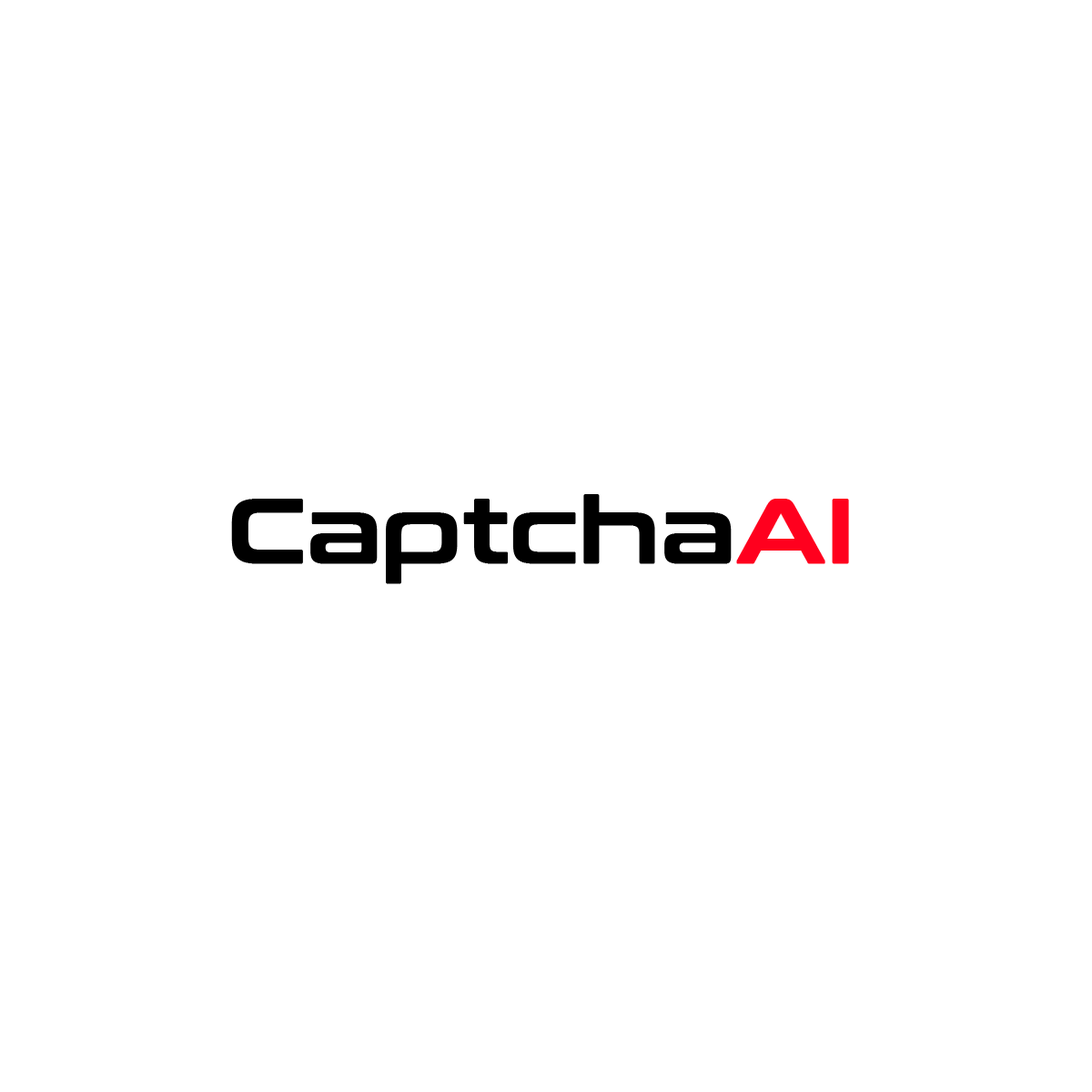
<style>
.page{position:relative;width:1092px;height:1092px;background:#ffffff}
.page>*{position:absolute;margin:0}
.t1{font:91px "ConthraxSb-Regular";color:#000000;font-weight:bold}
.t2{font:91px "ConthraxSb-Regular";color:#ff001e;font-weight:bold}
</style>
<div class="page">
<p class="t1" style="left:231px;top:494px;width:618px;height:90px">Captcha<span class="t2">AI</span></p>
</div>
